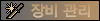
<style>
.page{position:relative;width:100px;height:21px}
.page>*{position:absolute;margin:0}
.t1{font:15px "YDIYGO330";color:#c9a67b}
</style>
<div class="page">
<p class="t1" style="left:31px;top:3px;width:59px;height:15px">장비 관리</p>
</div>
